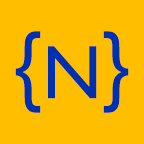
<style>
.page{position:relative;width:144px;height:144px;background:#ffbf00}
.page>*{position:absolute;margin:0}
.t1{font:86.9px "GillSans";color:#0030b2}
.t2{font:76.2px "GillSans";color:#0030b2}
</style>
<div class="page">
<p class="t1" style="left:15px;top:31px;width:114px;height:82px">{<span class="t2">N</span>}</p>
</div>
